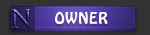
<style>
.page{position:relative;width:150px;height:35px;background:#333333}
.page>*{position:absolute;margin:0}
.t1{font:14px "HoboStd";letter-spacing:0.05em;color:#ffffff;text-transform:uppercase}
</style>
<div class="page">
<p class="t1" style="left:55px;top:11px;width:53px;height:13px">Owner</p>
</div>
